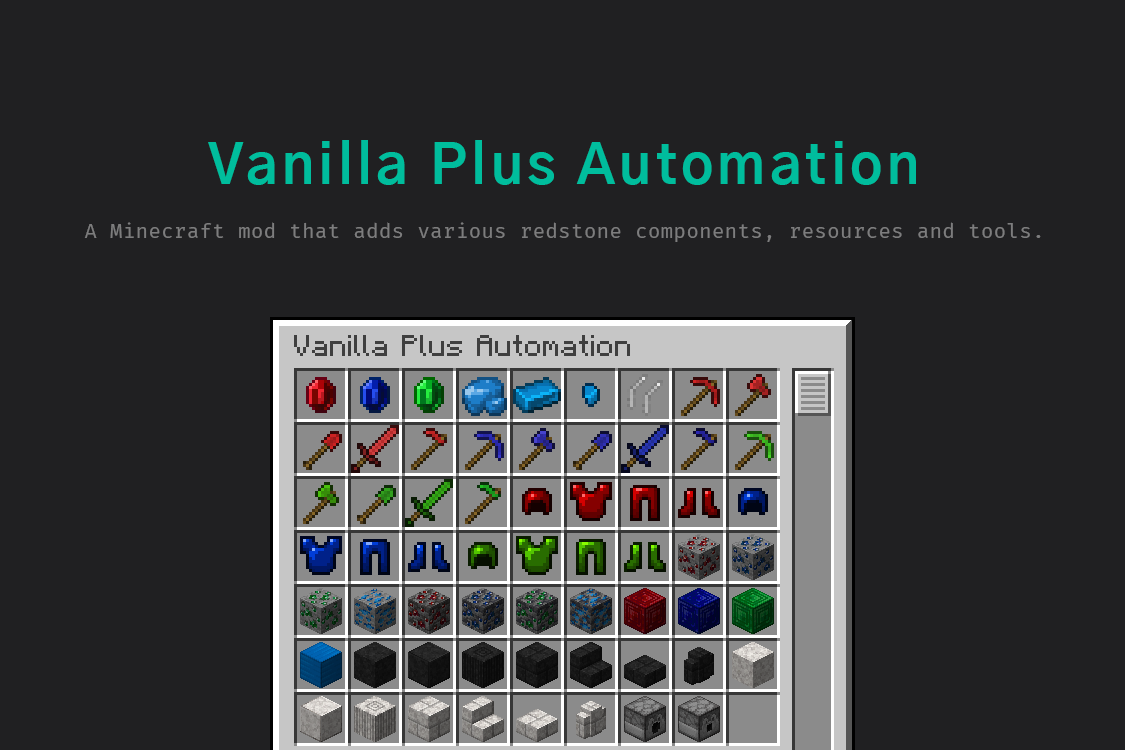
<style>
.page{position:relative;width:1125px;height:750px;background:#202022}
.page>*{position:absolute;margin:0}
.t1{font:55px "GothicA1-Bold";letter-spacing:0.075em;color:#00bd9d}
.t2{font:20px "FiraCode-Regular";letter-spacing:0.025em;color:#7d7d7e}
</style>
<div class="page">
<p class="t1" style="left:208px;top:140px;width:708px;height:45px">Vanilla Plus Automation</p>
<p class="t2" style="left:84px;top:222px;width:957px;height:20px">A Minecraft mod that adds various redstone components, resources and tools.</p>
</div>
